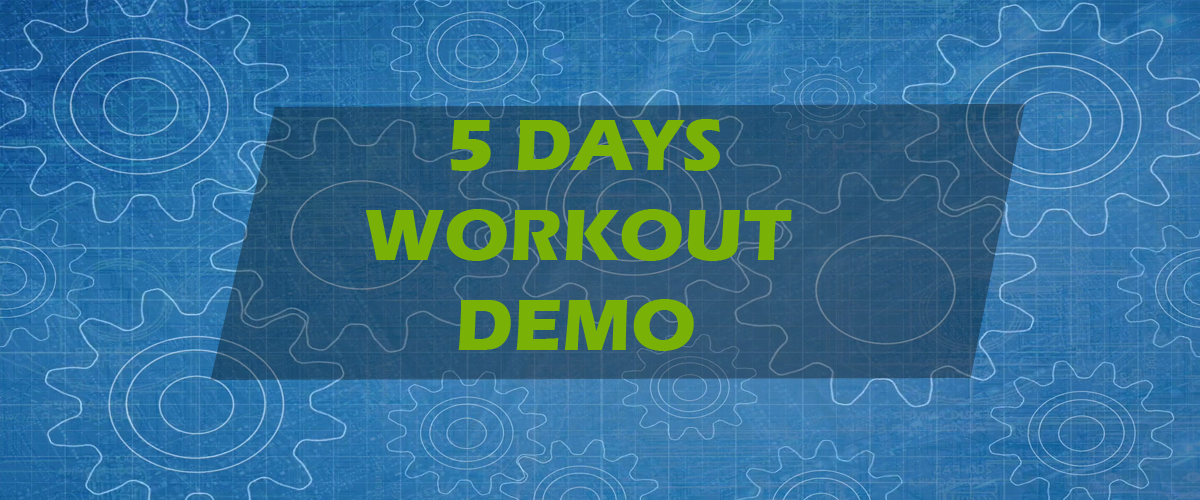
<style>
.page{position:relative;width:1200px;height:500px}
.page>*{position:absolute;margin:0}
.t1{font:75px "ErasITC-Bold";color:#79b106}
</style>
<div class="page">
<p class="t1" style="left:365px;top:119px;width:427px;height:232px">5 DAYS<br>       WORKOUT <br>             DEMO</p>
</div>
